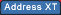
<style>
.page{position:relative;width:61px;height:15px;background:#3c72ae}
.page>*{position:absolute;margin:0}
.t1{font:9px "ArialMT";letter-spacing:0.075em;color:#ffffff}
</style>
<div class="page">
<p class="t1" style="left:4px;top:3px;width:53px;height:7px">Address XT</p>
<p class="t1" style="left:4px;top:3px;width:53px;height:7px">Address XT</p>
</div>
